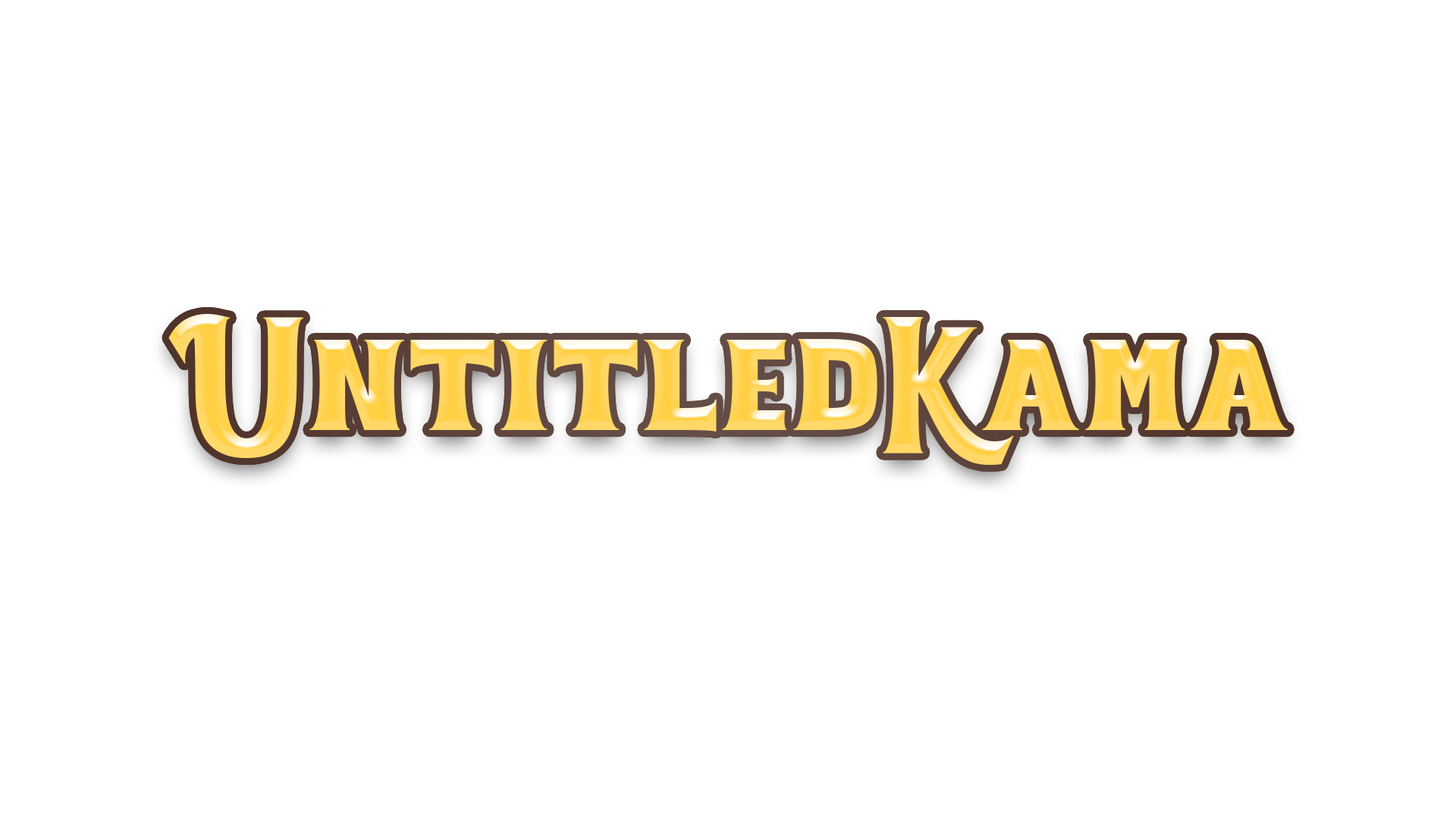
<style>
.page{position:relative;width:1456px;height:819px;background:#ffffff}
.page>*{position:absolute;margin:0}
.t1{font:113.5px "Marvelan"}
</style>
<div class="page">
<p class="t1" style="left:168px;top:314px;width:1120px;height:151px">UntitledKama</p>
</div>
